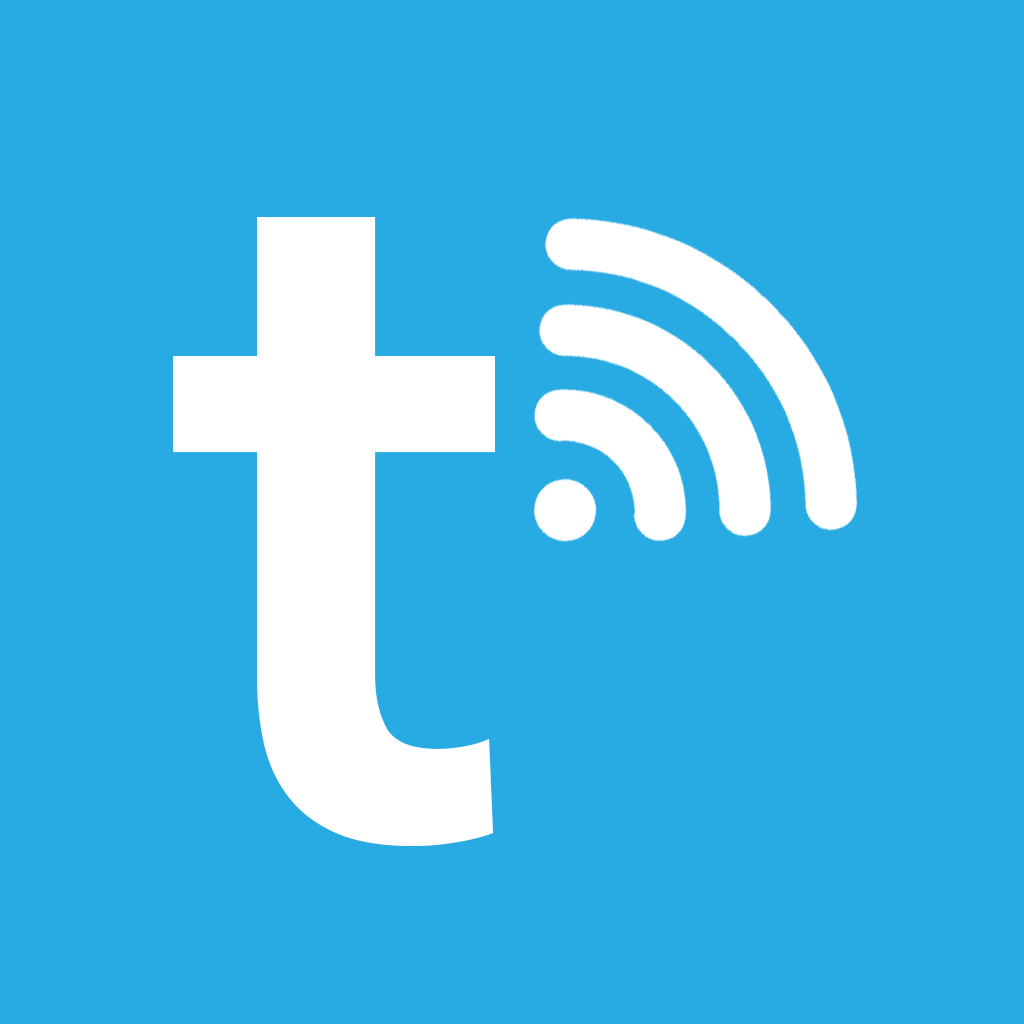
<style>
.page{position:relative;width:1024px;height:1024px;background:#28abe3}
.page>*{position:absolute;margin:0}
.t1{font:1000px "AvenirNext-DemiBold";color:#ffffff}
</style>
<div class="page">
<p class="t1" style="left:173px;top:217px;width:322px;height:629px">t</p>
</div>
